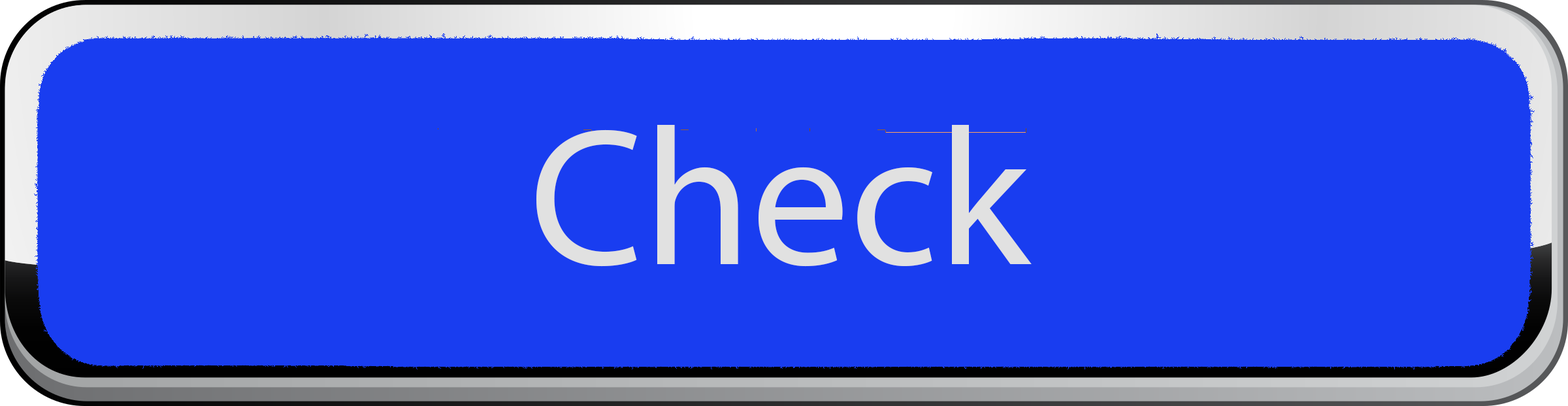
<style>
.page{position:relative;width:1568px;height:406px;background:#193df0}
.page>*{position:absolute;margin:0}
.t1{font:196px "MyriadPro-Regular";color:#e1e1e1}
</style>
<div class="page">
<p class="t1" style="left:536px;top:125px;width:496px;height:142px">Check</p>
</div>
